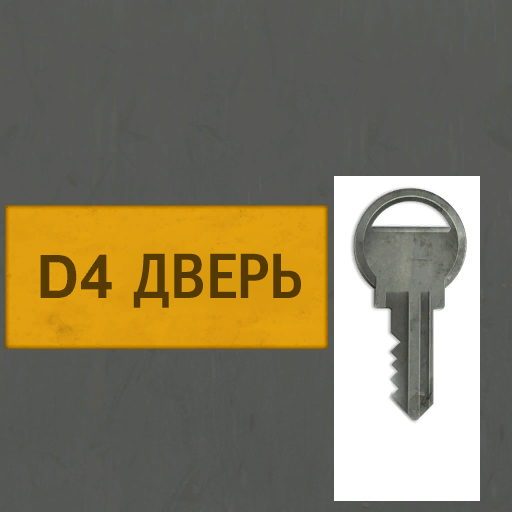
<style>
.page{position:relative;width:512px;height:512px}
.page>*{position:absolute;margin:0}
.t1{font:64px "FranklinGothicMediCondSCC";color:#543a02}
</style>
<div class="page">
<p class="t1" style="left:133px;top:253px;width:168px;height:55px">ДВЕРЬ</p>
</div>
